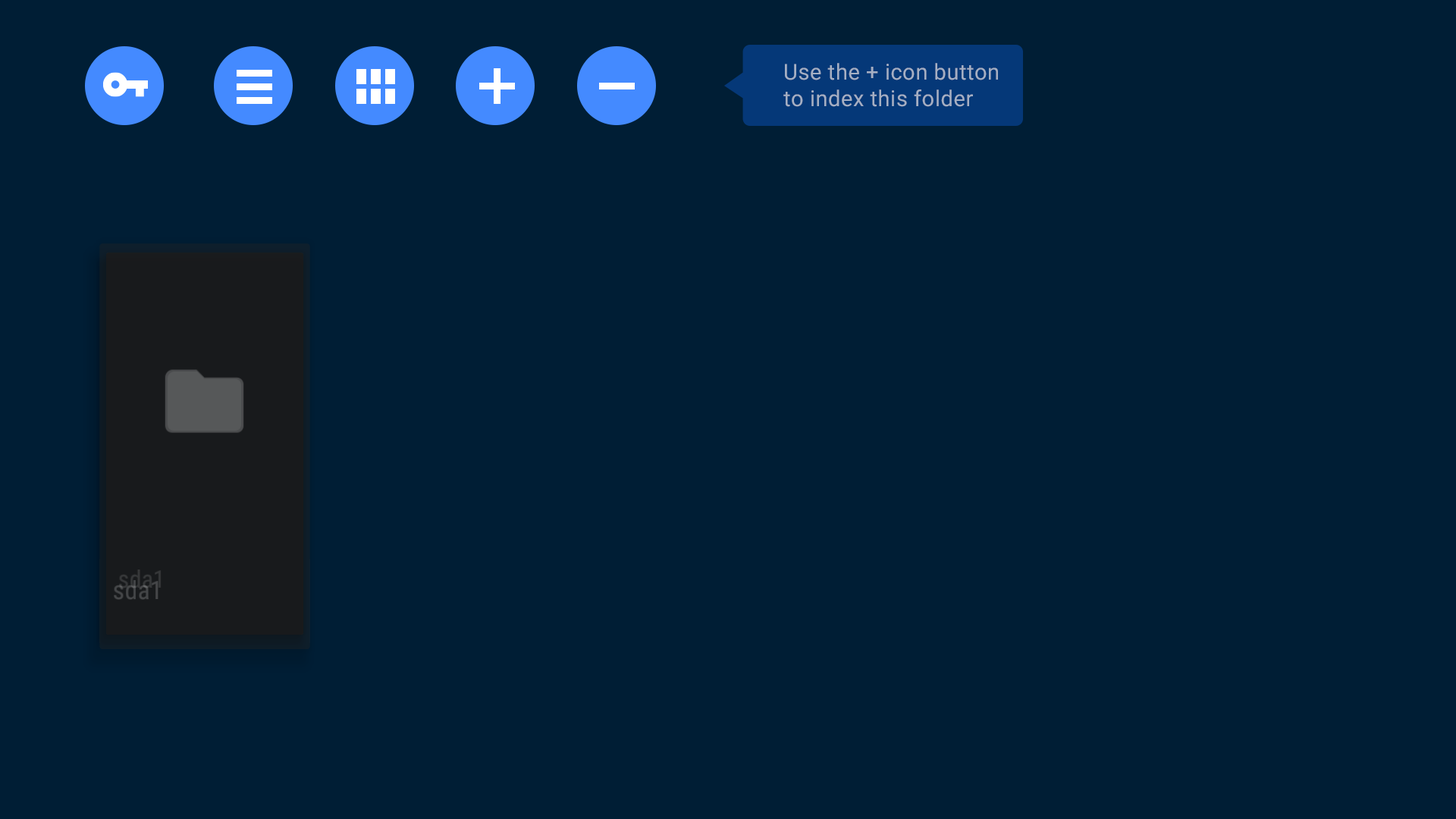
<style>
.page{position:relative;width:1456px;height:819px;background:#001e35}
.page>*{position:absolute;margin:0}
.t1{font:22px "Roboto-Regular";letter-spacing:0.02em;color:#a5afc3}
</style>
<div class="page">
<p class="t1" style="left:783px;top:63px;width:215px;height:44px">Use the + icon button<br>to index this folder</p>
</div>
